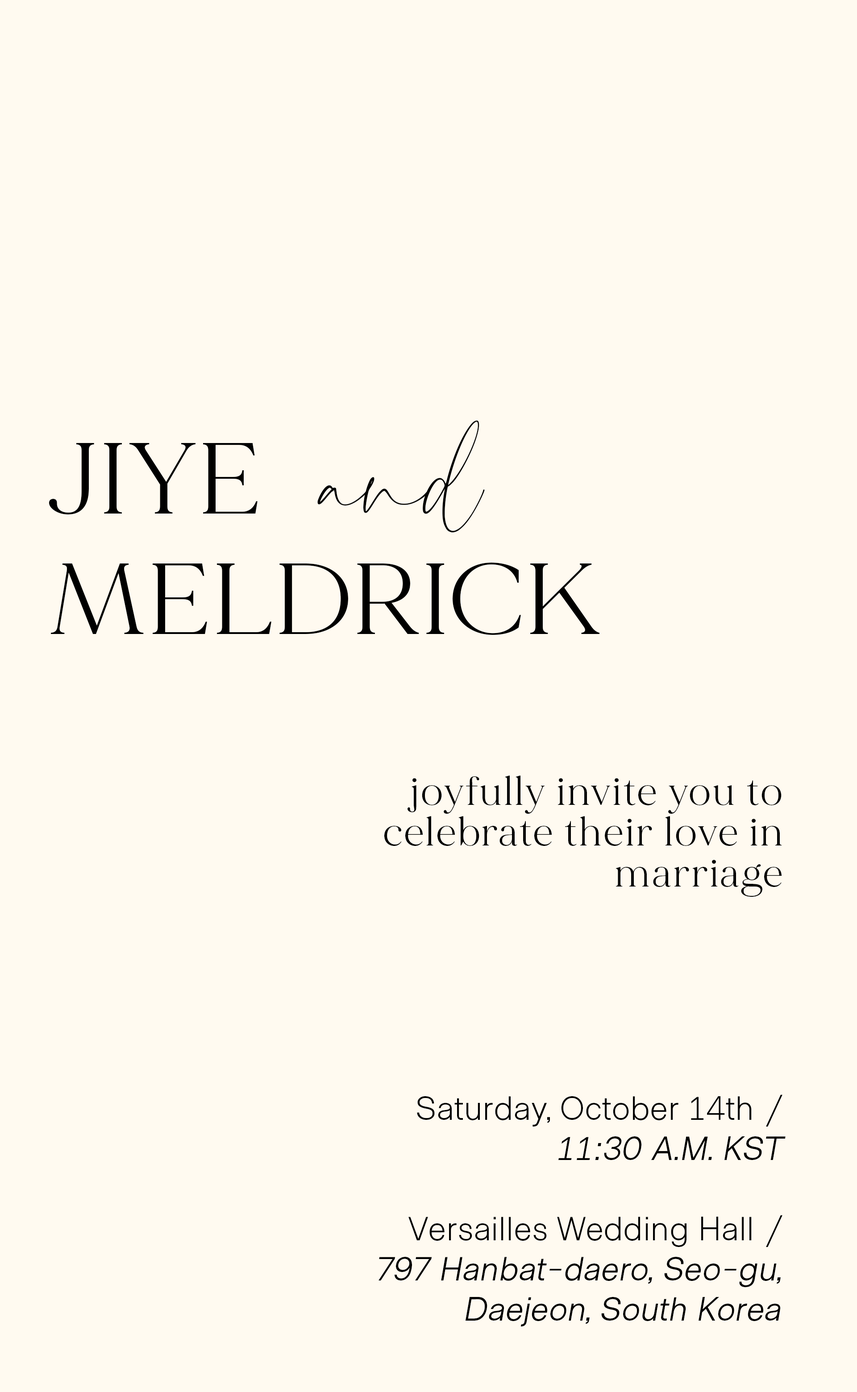
<style>
.page{position:relative;width:857px;height:1392px;background:#fffaf0}
.page>*{position:absolute;margin:0}
.t1{font:100.5px "MADEMirage";color:#000000;scale:1.09 1}
.t2{font:125.6px "Charlotte";color:#000000;scale:1.09 1}
.t3{font:40.2px/40.9px "MADEMirage";letter-spacing:0.04em;color:#000000}
.t4{font:33.5px "MetroSans-Light";color:#000000}
.t5{font:33.5px "MetroSans-BookItalic";color:#000000}
</style>
<div class="page">
<p class="t1" style="left:49px;top:420px;width:550px;height:215px">JIYE  <span class="t2">and </span>MELDRICK</p>
<p class="t3" style="left:378px;top:775px;width:407px;height:551px;text-align:right">joyfully invite you to celebrate their love in marriage<br><br><br><br><br><span class="t4">Saturday, October 14th /<br> </span><span class="t5">11:30 A.M. KST<br><br></span><span class="t4">Versailles Wedding Hall /<br> </span><span class="t5">797 Hanbat-daero, Seo-gu,  <br>Daejeon, South Korea</span></p>
</div>
